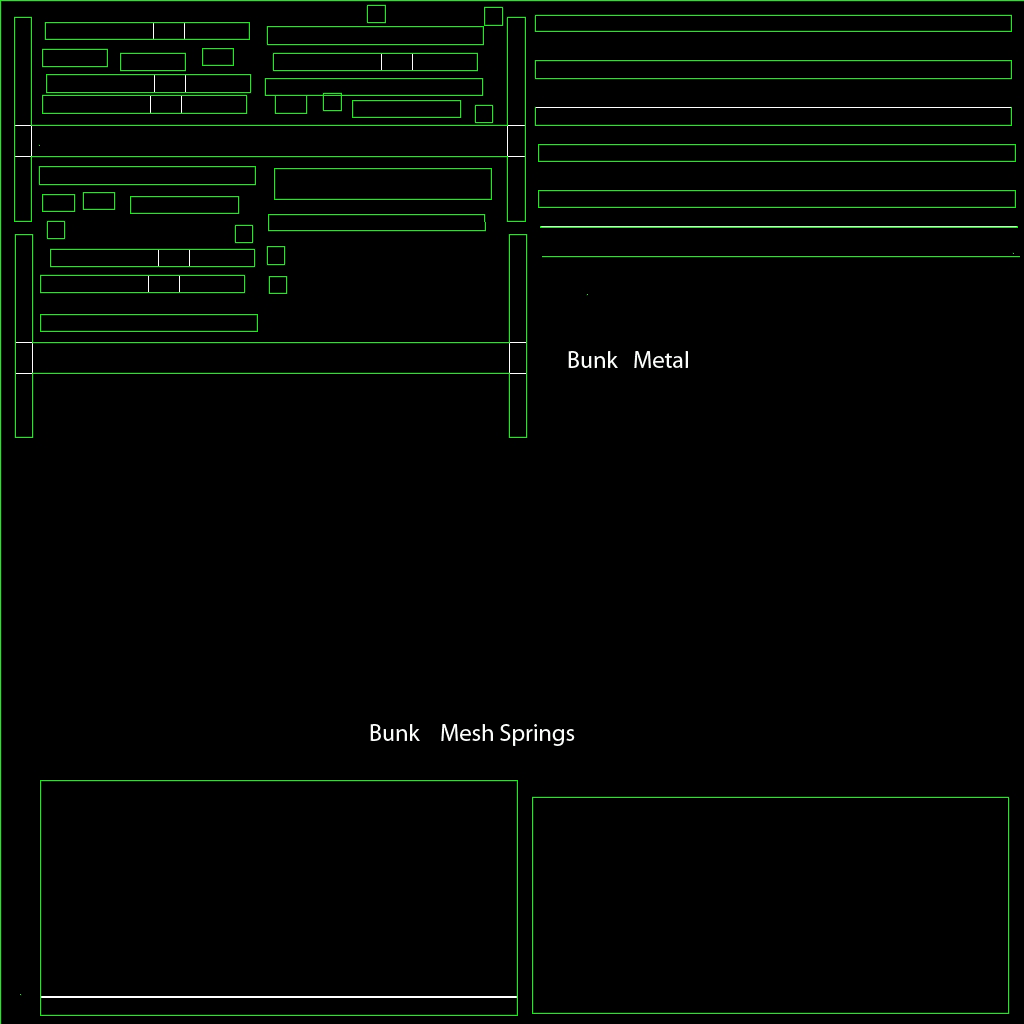
<style>
.page{position:relative;width:1024px;height:1024px;background:#000000}
.page>*{position:absolute;margin:0}
.t1{font:24px "MyriadPro-Regular";color:#fbfdfb}
</style>
<div class="page">
<p class="t1" style="left:568px;top:351px;width:120px;height:17px">Bunk   Metal</p>
<p class="t1" style="left:370px;top:724px;width:205px;height:22px">Bunk    Mesh Springs</p>
</div>
